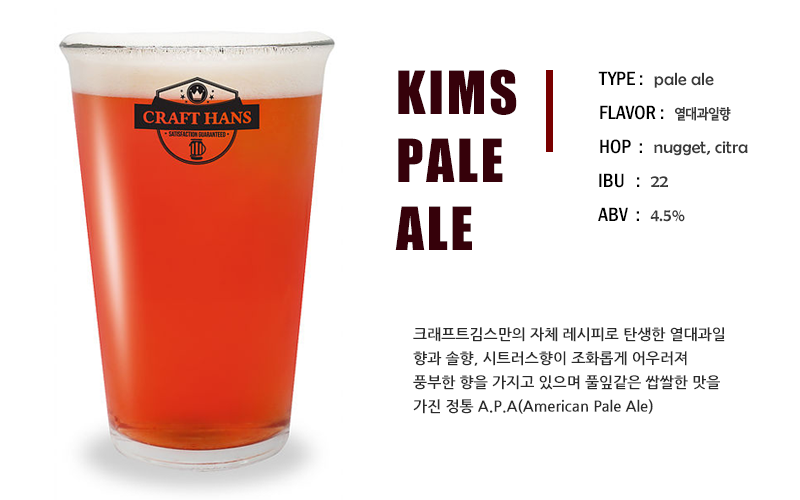
<style>
.page{position:relative;width:800px;height:500px;background:#ffffff}
.page>*{position:absolute;margin:0}
.t1{font:55px/68px "Impact";letter-spacing:0.05em;color:#36010a}
.t2{font:18px "BerlinSansFB-Reg";color:#3a3a3a}
.t3{font:20px "FranklinGothic-MediumCond";color:#000000}
.t4{font:14px "SeN-CBL";color:#3a3a3a}
.t5{font:15px/24px "NanumGothicBold";color:#2b2b2b}
</style>
<div class="page">
<p class="t1" style="left:395px;top:69px;width:122px;height:181px">KIMS<br>PALE<br>ALE</p>
<p class="t2" style="left:598px;top:71px;width:116px;height:17px"><span class="t3">TYPE :  </span>pale ale</p>
<p class="t3" style="left:600px;top:105px;width:131px;height:16px">FLAVOR :  <span class="t4">열대과일향</span></p>
<p class="t2" style="left:600px;top:139px;width:148px;height:17px"><span class="t3">HOP  :  </span>nugget, citra</p>
<p class="t3" style="left:599px;top:173px;width:69px;height:15px">IBU   :  <span class="t2">22</span></p>
<p class="t3" style="left:598px;top:207px;width:87px;height:15px">ABV  :  <span class="t2">4.5%</span></p>
<p class="t5" style="left:413px;top:327px;width:312px;height:87px">크래프트김스만의 자체 레시피로 탄생한 열대과일<br>향과 솔향, 시트러스향이 조화롭게 어우러져<br>풍부한 향을 가지고 있으며 풀잎같은 쌉쌀한 맛을<br>가진 정통 A.P.A(American Pale Ale)</p>
</div>
